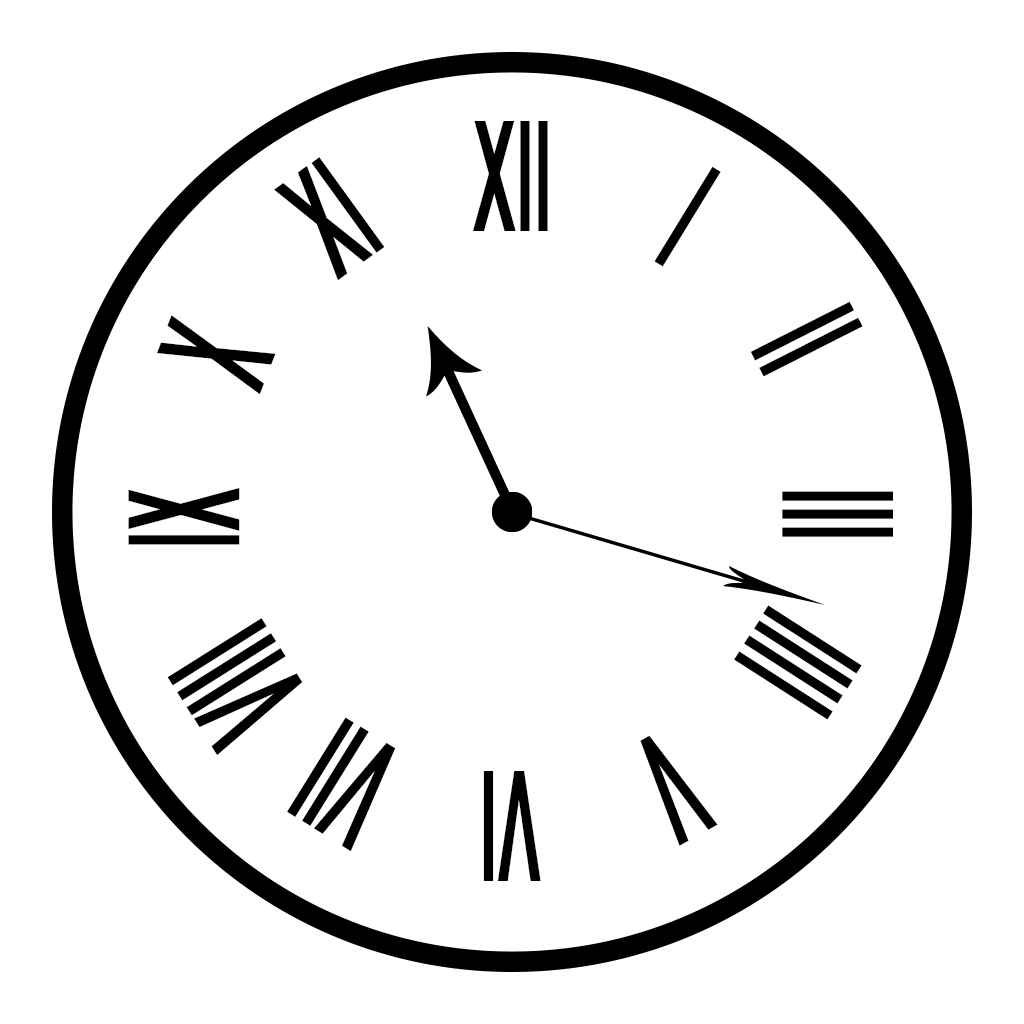
<style>
.page{position:relative;width:1024px;height:1024px;background:#ffffff}
.page>*{position:absolute;margin:0}
.t1{font:154.4px "Arial-BoldMT";color:#000000;scale:0.42 1}
</style>
<div class="page">
<p class="t1" style="left:473px;top:121px;width:75px;height:110px">XII</p>
<p class="t1" style="left:274px;top:157px;width:111px;height:123px;rotate:-36deg">XI</p>
<p class="t1" style="left:654px;top:166px;width:67px;height:101px;rotate:31deg">I</p>
<p class="t1" style="left:750px;top:301px;width:113px;height:76px;rotate:63deg">II</p>
<p class="t1" style="left:157px;top:315px;width:119px;height:79px;rotate:-69deg">X</p>
<p class="t1" style="left:128px;top:488px;width:112px;height:57px;rotate:-90deg">IX</p>
<p class="t1" style="left:782px;top:491px;width:111px;height:46px;rotate:90deg">III</p>
<p class="t1" style="left:734px;top:605px;width:128px;height:115px;rotate:-57deg">IIII</p>
<p class="t1" style="left:167px;top:618px;width:135px;height:137px;rotate:-122deg">VIII</p>
<p class="t1" style="left:287px;top:717px;width:109px;height:134px;rotate:-148deg">VII</p>
<p class="t1" style="left:640px;top:735px;width:78px;height:111px;rotate:151deg">V</p>
<p class="t1" style="left:483px;top:771px;width:58px;height:110px;rotate:180deg">VI</p>
</div>
